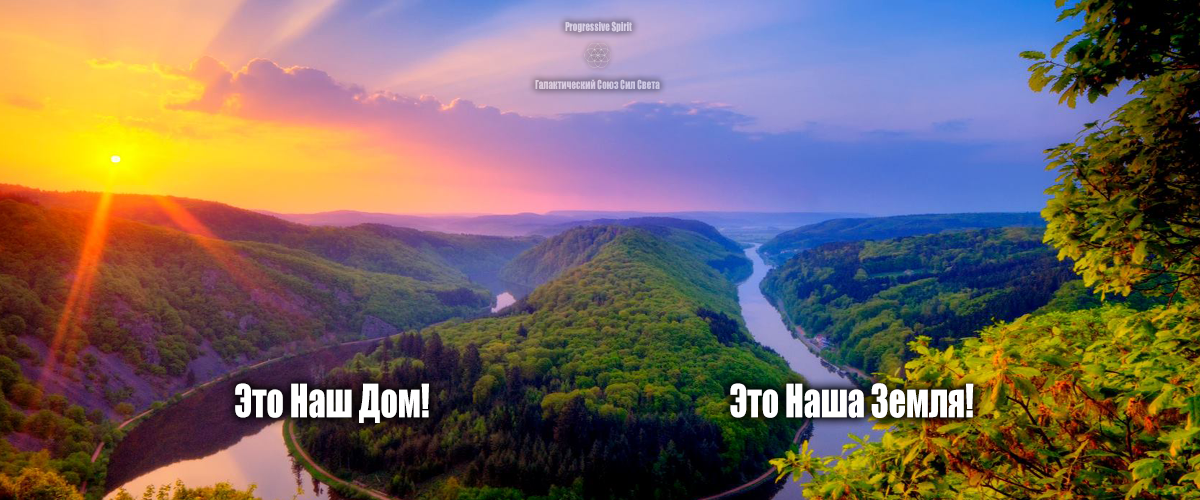
<style>
.page{position:relative;width:1200px;height:500px}
.page>*{position:absolute;margin:0}
.t1{font:11.4px "Impact";color:#d7cfe5;scale:0.8 1}
.t2{font:11.4px "Impact";color:#d5cae1;scale:0.8 1}
.t3{font:42.2px "Impact";color:#ffffff;scale:0.8 1}
</style>
<div class="page">
<p class="t1" style="left:565px;top:21px;width:67px;height:12px">Progressive Spirit</p>
<p class="t2" style="left:535px;top:79px;width:125px;height:11px">Галактический Союз Сил Света</p>
<p class="t3" style="left:235px;top:383px;width:194px;height:40px">Это Наш Дом!</p>
<p class="t3" style="left:730px;top:383px;width:244px;height:35px">Это Наша Земля!</p>
</div>
